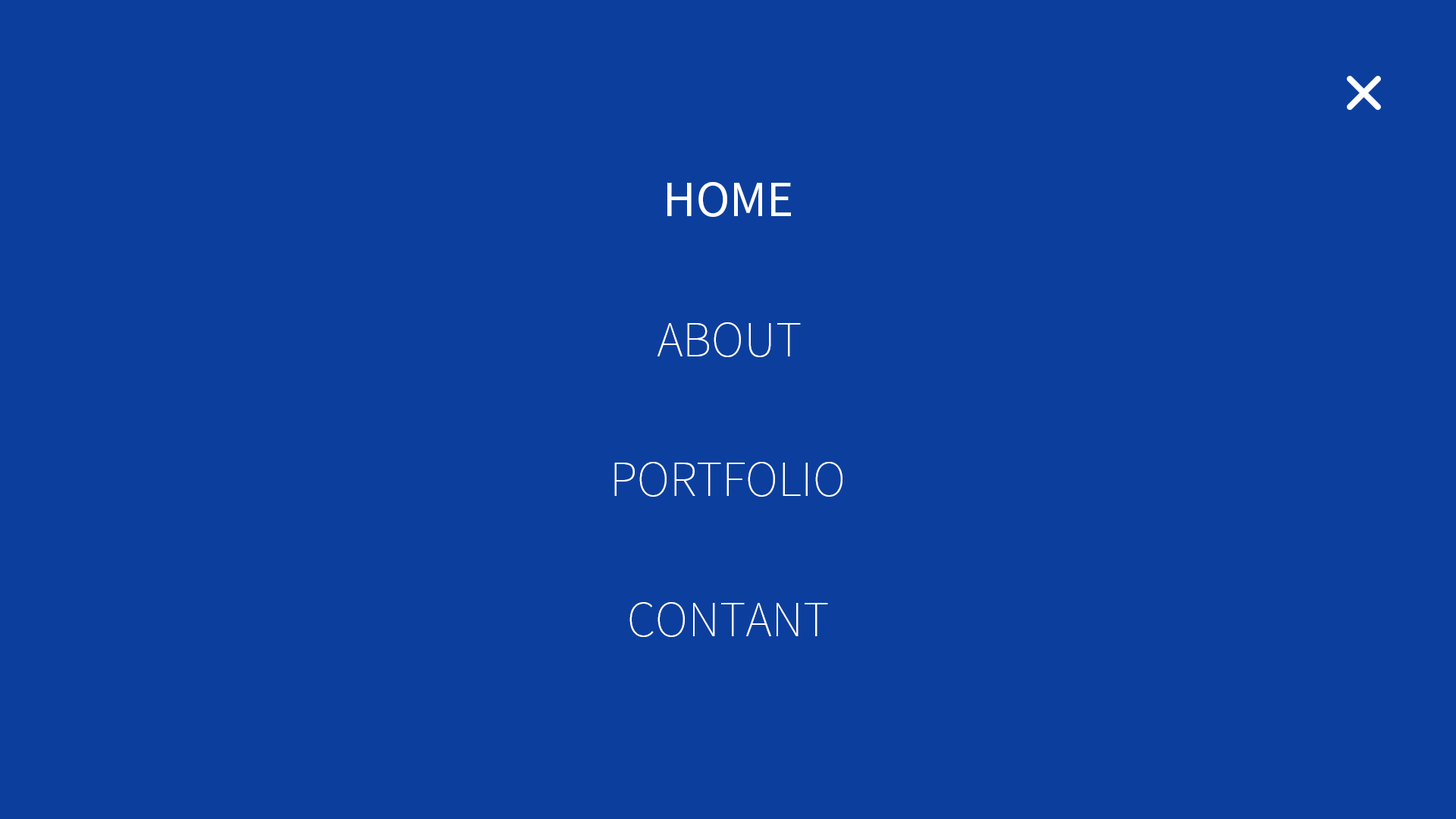
<style>
.page{position:relative;width:1456px;height:819px;background:#0c3f9d}
.page>*{position:absolute;margin:0}
.t1{font:45.5px "NotoSansKR-Regular";letter-spacing:-0.001em;color:#ffffff}
.t2{font:45.5px "NotoSansKR-Thin";letter-spacing:-0.001em;color:#ffffff}
</style>
<div class="page">
<p class="t1" style="left:667px;top:182px;width:124px;height:35px">HOME</p>
<p class="t2" style="left:657px;top:322px;width:144px;height:35px">ABOUT</p>
<p class="t2" style="left:614px;top:462px;width:228px;height:35px">PORTFOLIO</p>
<p class="t2" style="left:629px;top:602px;width:199px;height:35px">CONTANT</p>
</div>
